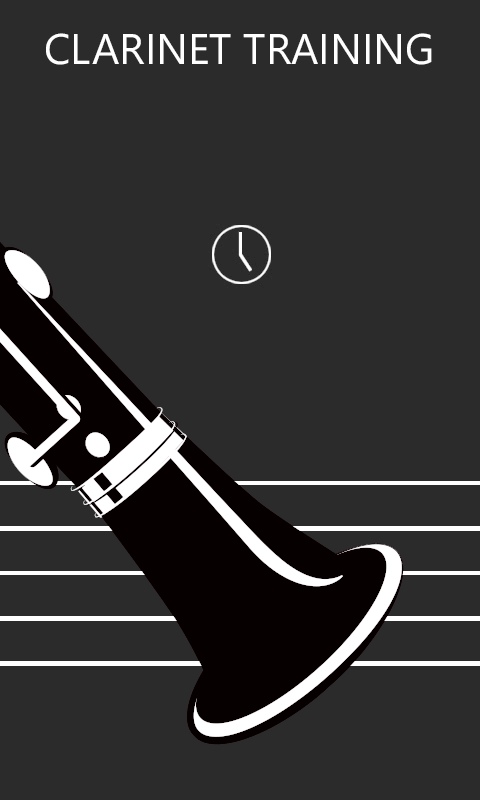
<style>
.page{position:relative;width:480px;height:800px;background:#2b2b2b}
.page>*{position:absolute;margin:0}
.t1{font:42.7px "SegoeWP";color:#ffffff}
</style>
<div class="page">
<p class="t1" style="left:46px;top:33px;width:386px;height:32px">CLARINET TRAINING</p>
</div>
